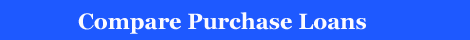
<style>
.page{position:relative;width:470px;height:40px;background:#1e59ff}
.page>*{position:absolute;margin:0}
.t1{font:22px "Georgia-Bold";color:#fbfaff}
</style>
<div class="page">
<p class="t1" style="left:78px;top:12px;width:288px;height:22px">Compare Purchase Loans</p>
</div>
